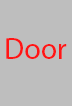
<style>
.page{position:relative;width:72px;height:106px;background:#bebebe}
.page>*{position:absolute;margin:0}
.t1{font:30px "MyriadPro-Regular";color:#ff1515}
</style>
<div class="page">
<p class="t1" style="left:6px;top:38px;width:61px;height:21px">Door</p>
</div>
